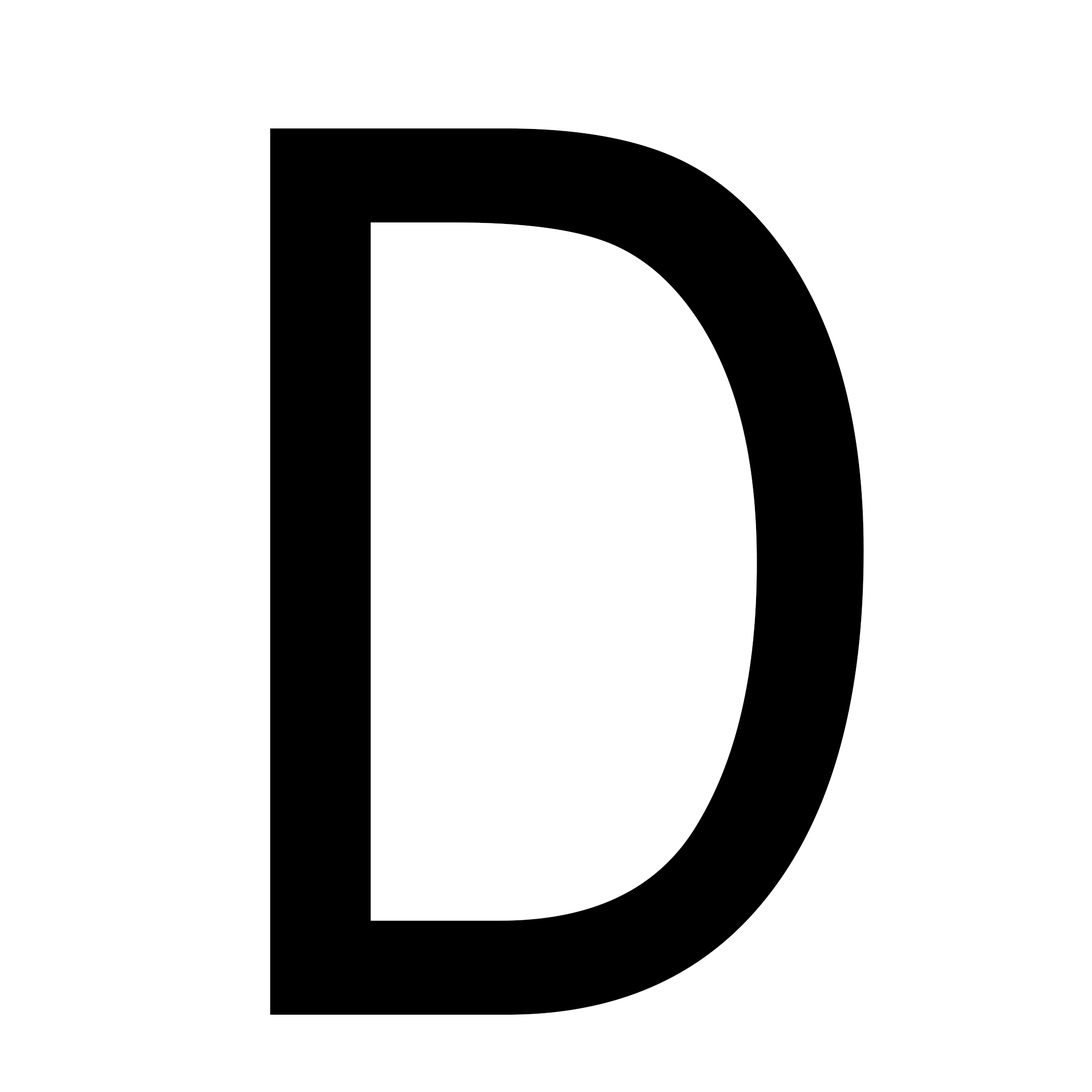
<style>
.page{position:relative;width:1092px;height:1092px;background:#ffffff}
.page>*{position:absolute;margin:0}
.t1{font:1226.4px "LucidaGrande";color:#000000;scale:0.8 1}
</style>
<div class="page">
<p class="t1" style="left:270px;top:128px;width:594px;height:887px">D</p>
</div>
